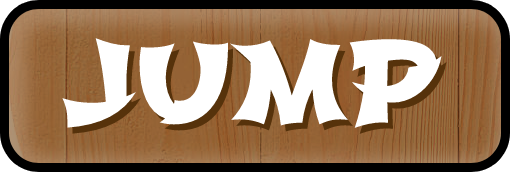
<style>
.page{position:relative;width:510px;height:172px;background:#ffffff}
.page>*{position:absolute;margin:0}
.t1{font:108.9px "Shojumaru-Regular";color:#ffffff}
</style>
<div class="page">
<p class="t1" style="left:62px;top:38px;width:380px;height:90px">JUMP</p>
<p class="t1" style="left:67px;top:44px;width:380px;height:90px">JUMP</p>
</div>
